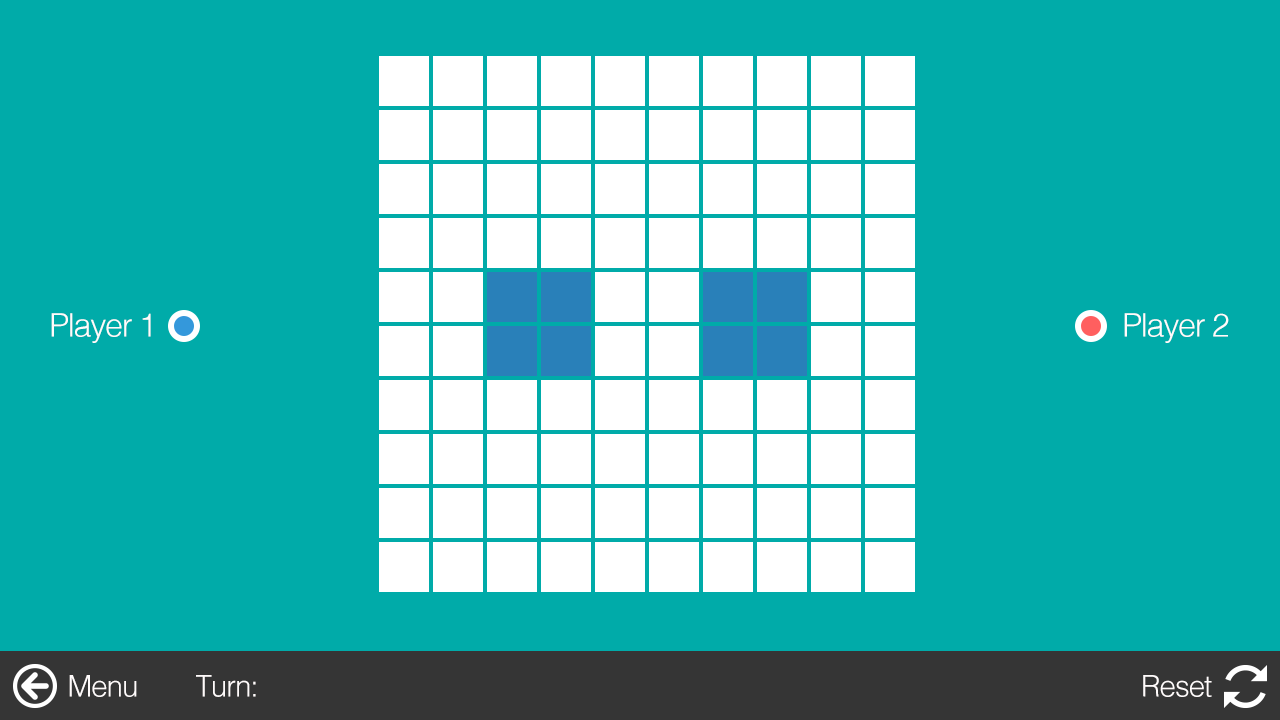
<style>
.page{position:relative;width:1280px;height:720px;background:#00aba9}
.page>*{position:absolute;margin:0}
.t1{font:32.1px "Helvetica-Light";letter-spacing:-0.04em;color:#fffbfb}
.t2{font:29.7px "Helvetica-Light";letter-spacing:-0.04em;color:#fffbfb}
</style>
<div class="page">
<p class="t1" style="left:51px;top:313px;width:100px;height:30px">Player 1</p>
<p class="t1" style="left:1124px;top:313px;width:105px;height:30px">Player 2</p>
<p class="t2" style="left:69px;top:675px;width:68px;height:22px">Menu</p>
<p class="t2" style="left:196px;top:675px;width:60px;height:22px">Turn:</p>
<p class="t2" style="left:1143px;top:675px;width:69px;height:22px">Reset</p>
</div>
